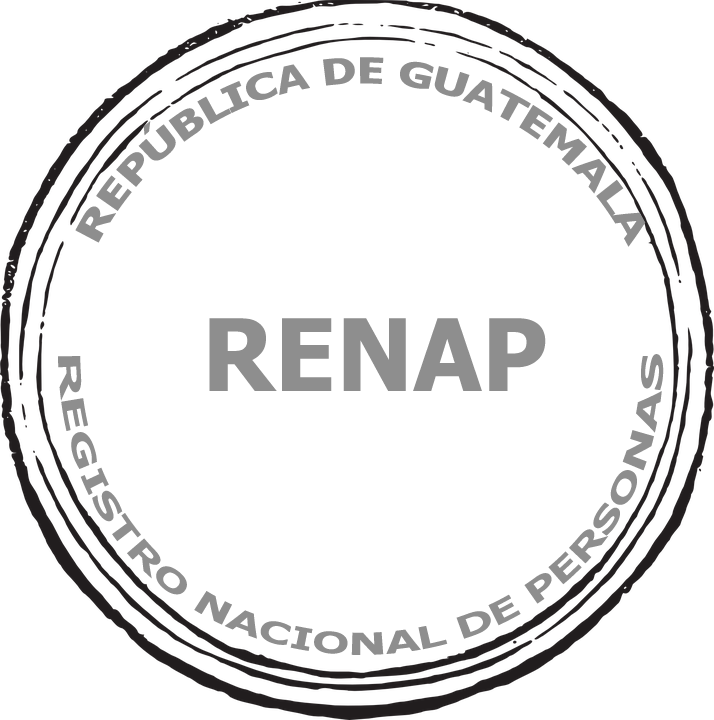
<style>
.page{position:relative;width:714px;height:720px;background:#ffffff}
.page>*{position:absolute;margin:0}
.t1{font:36px "Tahoma-Bold";color:#8e8e8e}
.t2{font:100px "Tahoma-Bold";color:#8e8e8e}
.t3{font:30px "Tahoma-Bold";color:#8e8e8e}
</style>
<div class="page">
<p class="t1" style="left:75px;top:57px;width:571px;height:190px">REPÚBLICA DE GUATEMALA</p>
<p class="t2" style="left:209px;top:318px;width:337px;height:73px">RENAP</p>
<p class="t3" style="left:58px;top:354px;width:606px;height:301px">REGISTRO NACIONAL DE PERSONAS</p>
</div>
